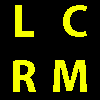
<style>
.page{position:relative;width:100px;height:100px;background:#000000}
.page>*{position:absolute;margin:0}
.t1{font:46px "MyriadPro-Bold";letter-spacing:0.05em;color:#f6ff01}
</style>
<div class="page">
<p class="t1" style="left:13px;top:5px;width:74px;height:87px;text-align:center">L  C<br>R M</p>
</div>
